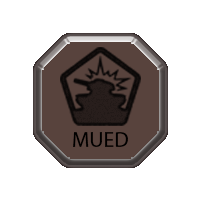
<style>
.page{position:relative;width:200px;height:200px;background:#ffffff}
.page>*{position:absolute;margin:0}
.t1{font:21.2px "MyriadPro-Regular";color:#000000;scale:1.03 1}
</style>
<div class="page">
<p class="t1" style="left:73px;top:132px;width:55px;height:15px">MUED</p>
</div>
